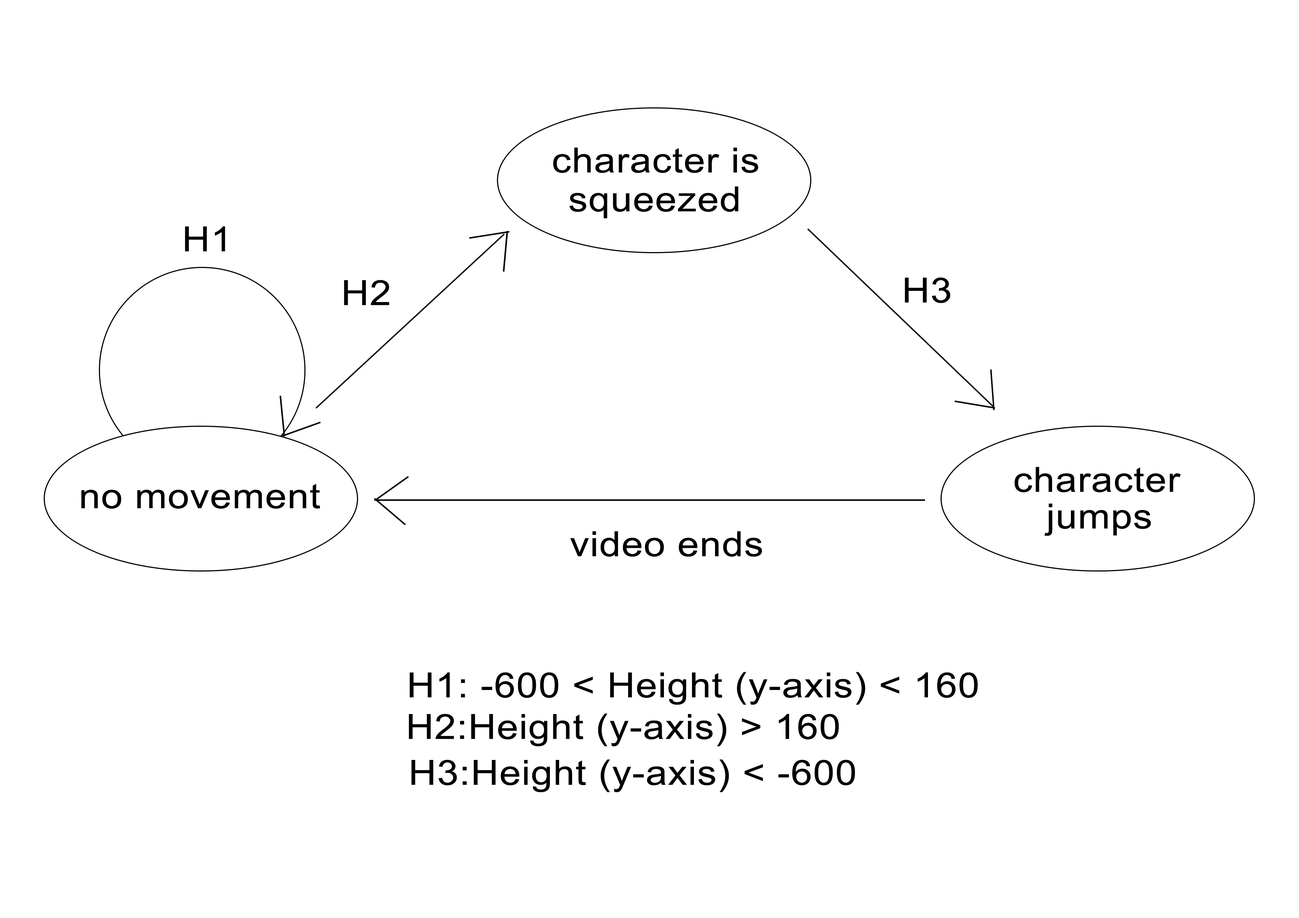
<style>
.page{position:relative;width:1299px;height:918px;background:#ffffff}
.page>*{position:absolute;margin:0}
.t1{font:34.7px "ArialMT";letter-spacing:0.02em;color:#000000;scale:1.11 1}
</style>
<div class="page">
<p class="t1" style="left:553px;top:147px;width:205px;height:26px">character is</p>
<p class="t1" style="left:569px;top:186px;width:169px;height:32px">squeezed</p>
<p class="t1" style="left:185px;top:226px;width:40px;height:25px">H1</p>
<p class="t1" style="left:344px;top:280px;width:45px;height:25px">H2</p>
<p class="t1" style="left:904px;top:277px;width:46px;height:26px">H3</p>
<p class="t1" style="left:1014px;top:467px;width:167px;height:25px">character</p>
<p class="t1" style="left:81px;top:484px;width:239px;height:25px">no movement</p>
<p class="t1" style="left:1044px;top:504px;width:107px;height:32px">jumps</p>
<p class="t1" style="left:570px;top:531px;width:192px;height:26px">video ends</p>
<p class="t1" style="left:409px;top:672px;width:569px;height:33px">H1: -600 &lt; Height (y-axis) &lt; 160</p>
<p class="t1" style="left:409px;top:713px;width:430px;height:33px">H2:Height (y-axis) &gt; 160</p>
<p class="t1" style="left:411px;top:759px;width:444px;height:33px">H3:Height (y-axis) &lt; -600</p>
</div>
